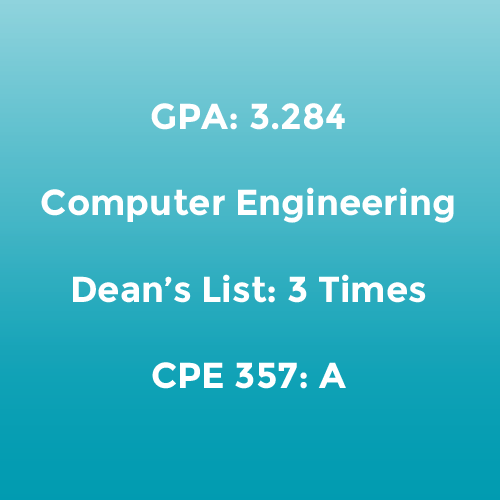
<style>
.page{position:relative;width:500px;height:500px}
.page>*{position:absolute;margin:0}
.t1{font:36px "Montserrat-Bold";color:#ffffff}
</style>
<div class="page">
<p class="t1" style="left:41px;top:103px;width:413px;height:286px;text-align:center">GPA: 3.284<br><br>Computer Engineering<br><br>Dean’s List: 3 Times<br><br>CPE 357: A</p>
</div>
